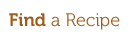
<style>
.page{position:relative;width:131px;height:40px;background:#ffffff}
.page>*{position:absolute;margin:0}
.t1{font:18px "Museo-300";color:#9c5c1a}
.t2{font:18px "Museo-700";color:#9c5c1a}
</style>
<div class="page">
<p class="t1" style="left:9px;top:13px;width:111px;height:17px"><span class="t2">Find </span>a Recipe</p>
</div>
